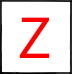
<style>
.page{position:relative;width:72px;height:74px;background:#ffffff}
.page>*{position:absolute;margin:0}
.t1{font:60px "MyriadPro-Regular";color:#ff0000}
</style>
<div class="page">
<p class="t1" style="left:19px;top:17px;width:31px;height:41px">Z</p>
</div>
